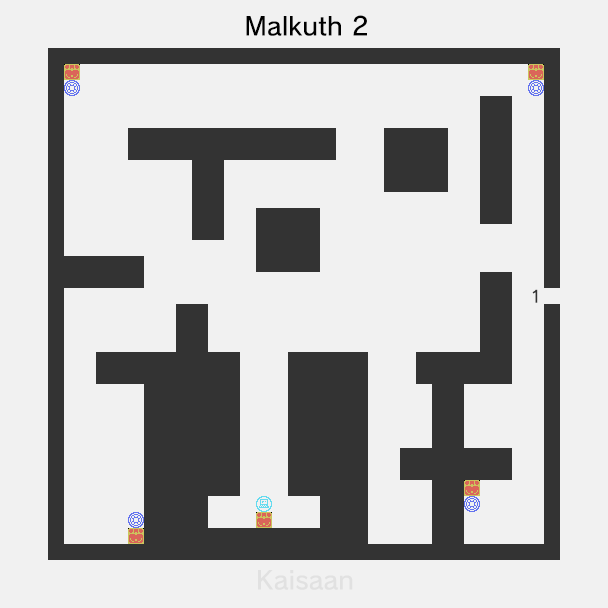
<style>
.page{position:relative;width:608px;height:608px;background:#f1f1f1}
.page>*{position:absolute;margin:0}
.t1{font:25px "nintendoNTLG-DB002";color:#000000}
.t2{font:16.7px "nintendoNTLG-DB002";color:#333333}
.t3{font:25px "nintendoNTLG-DB002";color:#e1e1e1}
</style>
<div class="page">
<p class="t1" style="left:246px;top:15px;width:121px;height:21px">Malkuth 2</p>
<p class="t2" style="left:532px;top:289px;width:6px;height:14px">1</p>
<p class="t3" style="left:258px;top:570px;width:95px;height:20px">Kaisaan</p>
</div>
